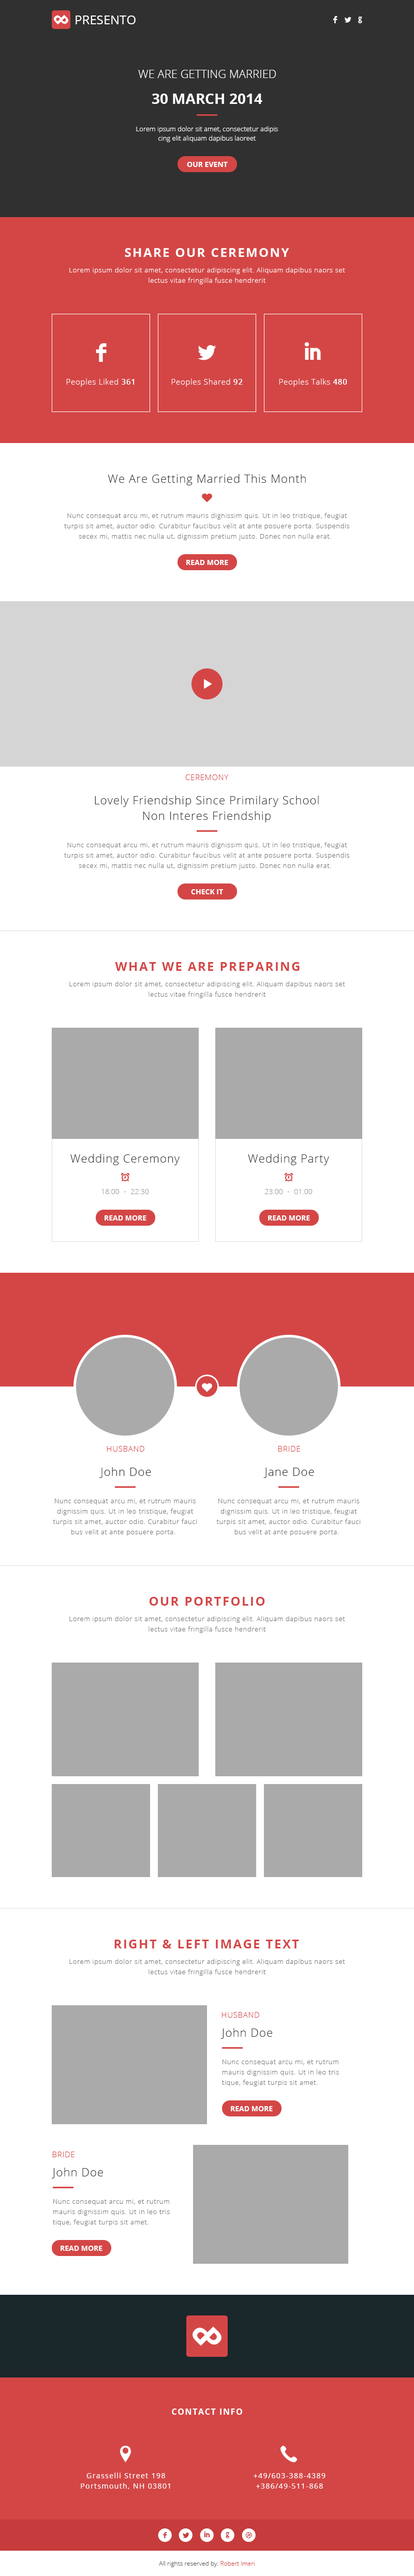
<style>
.page{position:relative;width:414px;height:2576px;background:#ffffff}
.page>*{position:absolute;margin:0}
.t1{font:15.5px "OpenSans-Bold";color:#ffffff}
.t2{font:12.4px "OpenSans";color:#ffffff}
.t3{font:11.4px "Socialico";letter-spacing:0.5em;color:#ffffff}
.t4{font:11.4px "OpenSans-Light";color:#ffffff}
.t5{font:14.5px "OpenSans-Bold";color:#ffffff}
.t6{font:14.5px "OpenSans-Bold";color:#fffefe}
.t7{font:6.7px/9.3px "OpenSans-Light";color:#ffffff}
.t8{font:7.2px "OpenSans-Bold";color:#ffffff}
.t9{font:12.4px "OpenSans-Bold";letter-spacing:0.1em;color:#ffffff}
.t10{font:6.7px/10.3px "OpenSans-Light";letter-spacing:0.05em;color:#ffffff}
.t11{font:31px "Socialico";letter-spacing:0.1em;color:#ffffff}
.t12{font:7.8px "OpenSans-Light";letter-spacing:0.05em;color:#ffffff}
.t13{font:7.8px "OpenSans-Semibold";letter-spacing:0.05em;color:#ffffff}
.t14{font:11.4px "OpenSans-Light";letter-spacing:0.05em;color:#333333}
.t15{font:6.7px/10.3px "OpenSans-Light";letter-spacing:0.05em;color:#777777}
.t16{font:7.8px "OpenSans-Light";letter-spacing:0.05em;color:#d44646}
.t17{font:11.4px/15.5px "OpenSans-Light";letter-spacing:0.05em;color:#333333}
.t18{font:12.4px "OpenSans-Bold";letter-spacing:0.1em;color:#d44646}
.t19{font:7.2px "OpenSans-Light";color:#999999}
.t20{font:31px "OpenSans-Bold";color:#ffffff}
.t21{font:8.3px "OpenSans-Bold";letter-spacing:0.1em;color:#ffffff}
.t22{font:7.2px/10.3px "OpenSans";letter-spacing:0.1em;color:#ffffff}
.t23{font:19.1px "Socialico";letter-spacing:0.3em;color:#ffffff}
.t24{font:6.2px "OpenSans-Light";color:#555555}
.t25{font:6.2px "OpenSans-Light";color:#d44646}
</style>
<div class="page">
<p class="t1" style="left:54px;top:15px;width:12px;height:10px;rotate:-135deg">P</p>
<p class="t1" style="left:56px;top:14px;width:12px;height:10px;rotate:45deg">P</p>
<p class="t2" style="left:75px;top:16px;width:60px;height:8px">PRESENTO</p>
<p class="t3" style="left:333px;top:16px;width:29px;height:7px">FLG</p>
<p class="t4" style="left:138px;top:70px;width:138px;height:8px">WE ARE GETTING MARRIED</p>
<p class="t5" style="left:152px;top:94px;width:15px;height:10px">30</p>
<p class="t6" style="left:173px;top:94px;width:51px;height:10px">MARCH</p>
<p class="t5" style="left:230px;top:94px;width:32px;height:10px">2014</p>
<p class="t7" style="left:136px;top:126px;width:142px;height:16px;text-align:center">Lorem ipsum dolor sit amet, consectetur adipis cing elit aliquam dapibus laoreet</p>
<p class="t8" style="left:187px;top:162px;width:40px;height:5px">OUR EVENT</p>
<p class="t9" style="left:125px;top:248px;width:164px;height:9px">SHARE OUR CEREMONY</p>
<p class="t10" style="left:69px;top:267px;width:276px;height:17px;text-align:center">Lorem ipsum dolor sit amet, consectetur adipiscing elit. Aliquam dapibus naors set lectus vitae fringilla fusce hendrerit</p>
<p class="t11" style="left:96px;top:343px;width:10px;height:19px">F</p>
<p class="t11" style="left:197px;top:345px;width:19px;height:15px">L</p>
<p class="t11" style="left:304px;top:342px;width:17px;height:18px">I</p>
<p class="t12" style="left:66px;top:378px;width:68px;height:9px"><span class="t13">361</span> Peoples Liked</p>
<p class="t12" style="left:171px;top:378px;width:71px;height:9px"><span class="t13">92</span> Peoples Shared</p>
<p class="t12" style="left:279px;top:378px;width:68px;height:9px"><span class="t13">480</span> Peoples Talks</p>
<p class="t14" style="left:108px;top:474px;width:198px;height:11px">We Are Getting Married This Month</p>
<p class="t15" style="left:64px;top:513px;width:285px;height:27px;text-align:center">Nunc consequat arcu mi, et rutrum mauris dignissim quis. Ut in leo tristique, feugiat turpis sit amet, auctor odio. Curabitur faucibus velit at ante posuere porta. Suspendis secex mi, mattis nec nulla ut, dignissim pretium justo. Donec non nulla erat.<span class="t10">a</span></p>
<p class="t8" style="left:186px;top:560px;width:42px;height:5px">READ MORE</p>
<p class="t16" style="left:185px;top:774px;width:43px;height:6px">CEREMONY</p>
<p class="t17" style="left:95px;top:796px;width:223px;height:26px;text-align:center">Lovely Friendship Since Primilary School<br>Non Interes Friendship</p>
<p class="t15" style="left:64px;top:842px;width:285px;height:28px;text-align:center">Nunc consequat arcu mi, et rutrum mauris dignissim quis. Ut in leo tristique, feugiat turpis sit amet, auctor odio. Curabitur faucibus velit at ante posuere porta. Suspendis secex mi, mattis nec nulla ut, dignissim pretium justo. Donec non nulla erat.<span class="t10">a</span></p>
<p class="t8" style="left:191px;top:889px;width:32px;height:5px">CHECK IT</p>
<p class="t18" style="left:115px;top:962px;width:184px;height:9px">WHAT WE ARE PREPARING</p>
<p class="t15" style="left:69px;top:981px;width:276px;height:17px;text-align:center">Lorem ipsum dolor sit amet, consectetur adipiscing elit. Aliquam dapibus naors set lectus vitae fringilla fusce hendrerit</p>
<p class="t14" style="left:70px;top:1154px;width:110px;height:11px">Wedding Ceremony</p>
<p class="t14" style="left:248px;top:1154px;width:81px;height:11px">Wedding Party</p>
<p class="t19" style="left:101px;top:1189px;width:18px;height:5px">18:00</p>
<p class="t19" style="left:124px;top:1192px;width:2px;height:0px">-</p>
<p class="t19" style="left:130px;top:1189px;width:19px;height:5px">22:30</p>
<p class="t19" style="left:264px;top:1189px;width:19px;height:5px">23:00</p>
<p class="t19" style="left:287px;top:1192px;width:2px;height:0px">-</p>
<p class="t19" style="left:294px;top:1189px;width:18px;height:5px">01:00</p>
<p class="t8" style="left:104px;top:1215px;width:42px;height:6px">READ MORE</p>
<p class="t8" style="left:268px;top:1215px;width:42px;height:6px">READ MORE</p>
<p class="t16" style="left:106px;top:1446px;width:38px;height:6px">HUSBAND</p>
<p class="t16" style="left:278px;top:1446px;width:22px;height:6px">BRIDE</p>
<p class="t14" style="left:99px;top:1467px;width:52px;height:11px">John Doe</p>
<p class="t14" style="left:263px;top:1468px;width:51px;height:10px">Jane Doe</p>
<p class="t15" style="left:53px;top:1499px;width:143px;height:37px;text-align:center">Nunc consequat arcu mi, et rutrum mauris dignissim quis. Ut in leo tristique, feugiat turpis sit amet, auctor odio. Curabitur fauci bus velit at ante posuere porta.<span class="t10">a</span></p>
<p class="t15" style="left:216px;top:1499px;width:144px;height:37px;text-align:center">Nunc consequat arcu mi, et rutrum mauris dignissim quis. Ut in leo tristique, feugiat turpis sit amet, auctor odio. Curabitur fauci bus velit at ante posuere porta.<span class="t10">a</span></p>
<p class="t18" style="left:149px;top:1597px;width:116px;height:9px">OUR PORTFOLIO</p>
<p class="t15" style="left:69px;top:1616px;width:276px;height:17px;text-align:center">Lorem ipsum dolor sit amet, consectetur adipiscing elit. Aliquam dapibus naors set lectus vitae fringilla fusce hendrerit</p>
<p class="t18" style="left:114px;top:1940px;width:185px;height:8px">RIGHT &amp; LEFT IMAGE TEXT</p>
<p class="t15" style="left:69px;top:1959px;width:276px;height:17px;text-align:center">Lorem ipsum dolor sit amet, consectetur adipiscing elit. Aliquam dapibus naors set lectus vitae fringilla fusce hendrerit</p>
<p class="t16" style="left:221px;top:2012px;width:38px;height:6px">HUSBAND</p>
<p class="t14" style="left:220px;top:2028px;width:52px;height:11px">John Doe</p>
<p class="t15" style="left:222px;top:2060px;width:117px;height:26px;text-align:right">Nunc consequat arcu mi, et rutrum mauris dignissim quis. Ut in leo tris tique, feugiat turpis sit amet.<span class="t10">a</span></p>
<p class="t8" style="left:231px;top:2106px;width:41px;height:5px">READ MORE</p>
<p class="t16" style="left:52px;top:2152px;width:22px;height:5px">BRIDE</p>
<p class="t14" style="left:51px;top:2168px;width:52px;height:10px">John Doe</p>
<p class="t15" style="left:53px;top:2199px;width:117px;height:27px;text-align:right">Nunc consequat arcu mi, et rutrum mauris dignissim quis. Ut in leo tris tique, feugiat turpis sit amet.<span class="t10">a</span></p>
<p class="t8" style="left:60px;top:2246px;width:42px;height:5px">READ MORE</p>
<p class="t20" style="left:192px;top:2326px;width:25px;height:20px;rotate:-135deg">P</p>
<p class="t20" style="left:197px;top:2326px;width:24px;height:20px;rotate:45deg">P</p>
<p class="t21" style="left:172px;top:2409px;width:70px;height:6px">CONTACT INFO</p>
<p class="t22" style="left:81px;top:2473px;width:89px;height:16px;text-align:center">198 Grasselli Street<br>Portsmouth, NH 03801</p>
<p class="t22" style="left:253px;top:2473px;width:72px;height:16px;text-align:center">+49/603-388-4389<br>+386/49-511-868</p>
<p class="t23" style="left:158px;top:2528px;width:97px;height:14px">fligd</p>
<p class="t24" style="left:159px;top:2561px;width:95px;height:6px">All rights reserved by: <span class="t25">Robert Imeri</span></p>
</div>
